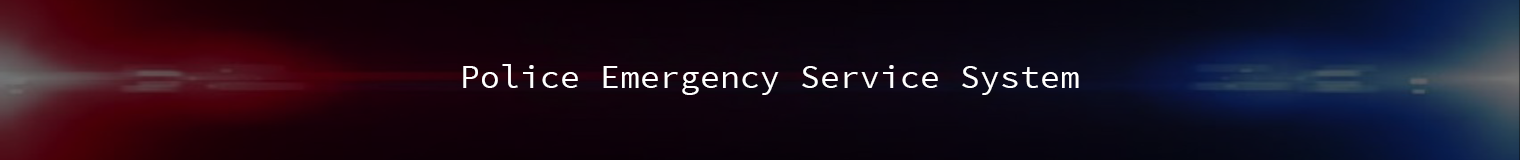
<style>
.page{position:relative;width:1520px;height:160px}
.page>*{position:absolute;margin:0}
.t1{font:33.3px "SourceCodePro-Regular";color:#ffffff}
</style>
<div class="page">
<p class="t1" style="left:463px;top:64px;width:616px;height:31px">Police Emergency Service System</p>
</div>
